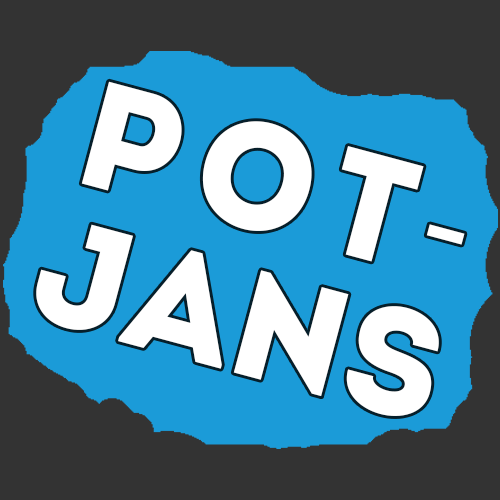
<style>
.page{position:relative;width:500px;height:500px;background:#1b9bd8}
.page>*{position:absolute;margin:0}
.t1{font:150.3px/143.2px "Intro";color:#ffffff}
.t2{font:150.3px/143.2px "Intro";letter-spacing:0.105em;color:#ffffff}
.t3{font:150.3px/143.2px "Roboto-Regular";letter-spacing:0.105em;color:#ffffff}
</style>
<div class="page">
<p class="t1" style="left:36px;top:81px;width:429px;height:335px;text-align:center;rotate:15deg"><span class="t2">POT</span><span class="t3">-<br></span>JANS</p>
</div>
